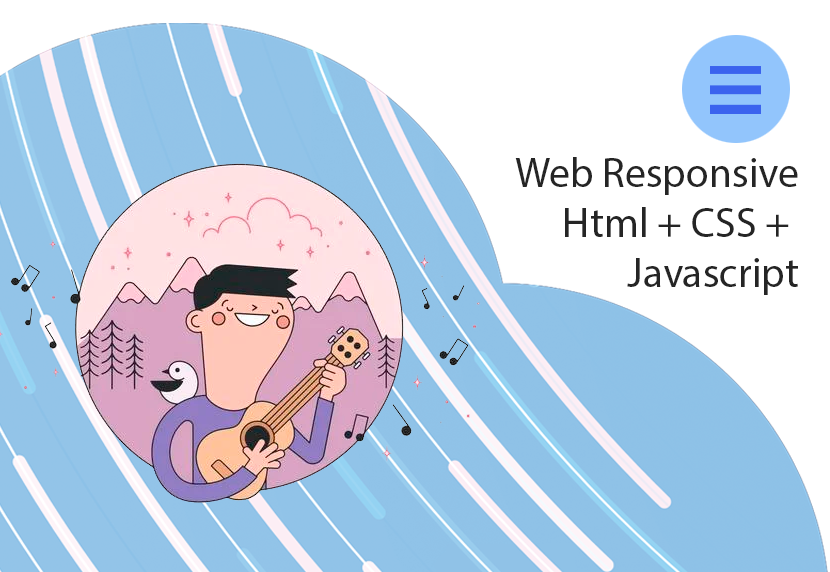
<style>
.page{position:relative;width:830px;height:572px;background:#ffffff}
.page>*{position:absolute;margin:0}
.t1{font:41.7px "MyriadPro-Regular";color:#252525}
</style>
<div class="page">
<p class="t1" style="left:515px;top:157px;width:283px;height:138px;text-align:right">Web Responsive<br>Html + CSS + <br>Javascript</p>
</div>
